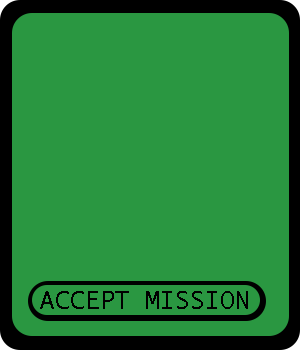
<style>
.page{position:relative;width:300px;height:350px;background:#2a9741}
.page>*{position:absolute;margin:0}
.t1{font:25px "LucidaSans-Typewriter";color:#000000}
</style>
<div class="page">
<p class="t1" style="left:40px;top:291px;width:208px;height:18px">ACCEPT MISSION</p>
</div>
